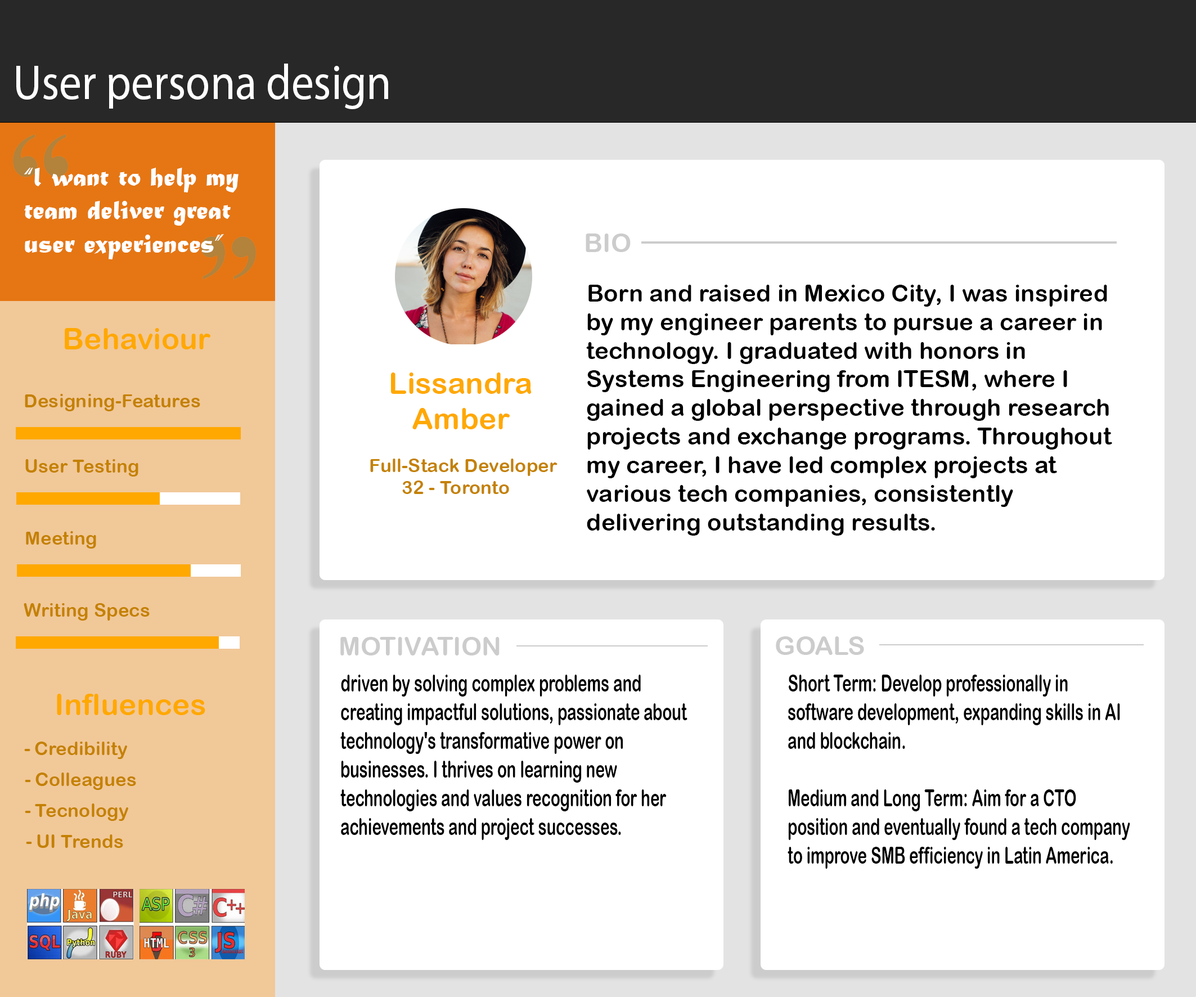
<style>
.page{position:relative;width:1196px;height:997px;background:#ffffff}
.page>*{position:absolute;margin:0}
.t1{font:49.6px "MyriadPro-Regular";color:#ffffff;scale:0.9 1}
.t2{font:27.8px "MaturaMTScriptCapitals";color:#ffffff}
.t3{font:25.9px "ArialRoundedMTBold";color:#cccccc}
.t4{font:23.9px "ArialRoundedMTBold";color:#000000}
.t5{font:30px "ArialRoundedMTBold";color:#ffa800}
.t6{font:18.8px "ArialRoundedMTBold";color:#c48100}
.t7{font:23.9px "ArialRoundedMTBold";color:#000000;scale:0.65 1}
</style>
<div class="page">
<p class="t1" style="left:16px;top:64px;width:372px;height:45px">User persona design</p>
<p class="t2" style="left:24px;top:168px;width:215px;height:91px">“l want to help my<br>team deliver great <br>user experiences”</p>
<p class="t3" style="left:586px;top:233px;width:45px;height:19px">BIO</p>
<p class="t4" style="left:586px;top:285px;width:526px;height:251px">Born and raised in Mexico City, I was inspired by my engineer parents to pursue a career in technology. I graduated with honors in Systems Engineering from ITESM, where I gained a global perspective through research projects and exchange programs. Throughout my career, I have led complex projects at various tech companies, consistently delivering outstanding results.</p>
<p class="t5" style="left:65px;top:328px;width:145px;height:21px">Behaviour</p>
<p class="t5" style="left:391px;top:372px;width:141px;height:57px;text-align:center">Lissandra<br>Amber</p>
<p class="t6" style="left:25px;top:394px;width:175px;height:17px">Designing-Features</p>
<p class="t6" style="left:25px;top:459px;width:113px;height:18px">User Testing</p>
<p class="t6" style="left:370px;top:459px;width:188px;height:35px">Full-Stack Developer<br>       32 - Toronto</p>
<p class="t6" style="left:26px;top:531px;width:70px;height:18px">Meeting</p>
<p class="t6" style="left:24px;top:603px;width:126px;height:18px">Writing Specs</p>
<p class="t3" style="left:340px;top:637px;width:160px;height:18px">MOTIVATION</p>
<p class="t3" style="left:776px;top:636px;width:88px;height:19px">GOALS</p>
<p class="t7" style="left:340px;top:675px;width:348px;height:165px">driven by solving complex problems and creating impactful solutions, passionate about technology's transformative power on businesses. I thrives on learning new technologies and values recognition for her achievements and project successes.</p>
<p class="t7" style="left:788px;top:675px;width:342px;height:194px">Short Term: Develop professionally in software development, expanding skills in AI and blockchain. <br><br>Medium and Long Term: Aim for a CTO position and eventually found a tech company to improve SMB efficiency in Latin America.</p>
<p class="t5" style="left:57px;top:694px;width:148px;height:21px">Influences</p>
<p class="t6" style="left:24px;top:742px;width:103px;height:17px">Credibility</p>
<p class="t6" style="left:25px;top:772px;width:111px;height:18px">Colleagues</p>
<p class="t6" style="left:25px;top:803px;width:103px;height:18px">Tecnology</p>
<p class="t6" style="left:26px;top:834px;width:97px;height:14px">UI Trends</p>
</div>
